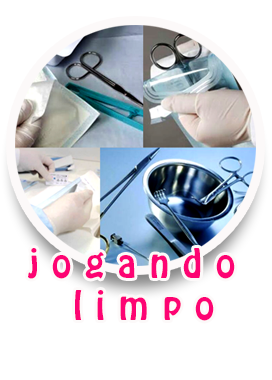
<style>
.page{position:relative;width:272px;height:380px;background:#ffffff}
.page>*{position:absolute;margin:0}
.t1{font:35.1px "HoboStd";letter-spacing:0.4em;color:#fd0373}
</style>
<div class="page">
<p class="t1" style="left:28px;top:248px;width:207px;height:73px;text-align:center">jogando <br>limpo</p>
</div>
